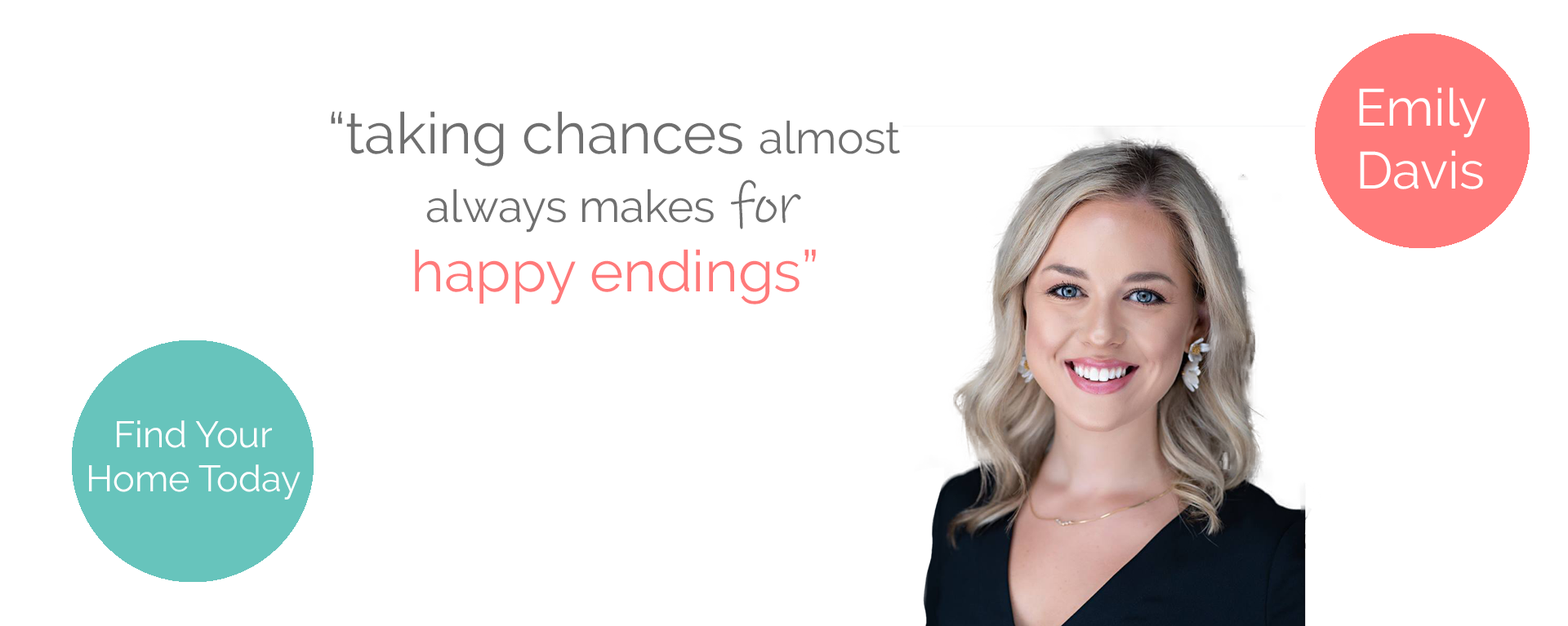
<style>
.page{position:relative;width:1568px;height:626px;background:#ffffff}
.page>*{position:absolute;margin:0}
.t1{font:52px "Raleway-Regular";color:#ffffff}
.t2{font:44.9px "Raleway-Regular";color:#6f6f6f}
.t3{font:57.3px "Raleway-Regular";color:#6f6f6f}
.t4{font:57.3px "InkFree";color:#6f6f6f}
.t5{font:57.3px "Raleway-Regular";color:#ff7a7a}
.t6{font:36.8px "Raleway-Regular";color:#ffffff}
</style>
<div class="page">
<p class="t1" style="left:1359px;top:87px;width:127px;height:102px;text-align:center">Emily<br>Davis</p>
<p class="t2" style="left:331px;top:111px;width:569px;height:194px;text-align:center"><span class="t3">“taking chances </span>almost<br>always makes <span class="t4">for<br> </span><span class="t5">happy endings”</span></p>
<p class="t6" style="left:89px;top:421px;width:212px;height:79px;text-align:center">Find Your<br>Home Today</p>
</div>
